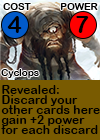
<style>
.page{position:relative;width:100px;height:140px;background:#795b01}
.page>*{position:absolute;margin:0}
.t1{font:9.7px "ArialRoundedMTBold";letter-spacing:0.01em;color:#000000}
.t2{font:24px "ArialRoundedMTBold";letter-spacing:0.01em;color:#000000}
.t3{font:24px "ArialRoundedMTBold";letter-spacing:-0.1em;color:#000000}
.t4{font:12px/10px "ArialRoundedMTBold";letter-spacing:0.01em;color:#000000}
</style>
<div class="page">
<p class="t1" style="left:3px;top:3px;width:28px;height:7px">COST</p>
<p class="t1" style="left:60px;top:3px;width:38px;height:7px">POWER</p>
<p class="t2" style="left:7px;top:16px;width:15px;height:17px">4</p>
<p class="t3" style="left:76px;top:16px;width:13px;height:17px">7</p>
<p class="t1" style="left:1px;top:69px;width:38px;height:9px">Cyclops</p>
<p class="t4" style="left:1px;top:85px;width:99px;height:49px">Revealed:<br>Discard your<br>other cards here<br>gain +2 power <br>for each discard</p>
</div>
